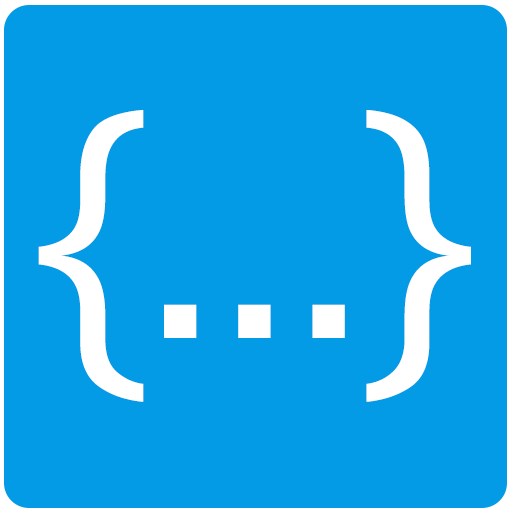
<style>
.page{position:relative;width:512px;height:512px;background:#039be5}
.page>*{position:absolute;margin:0}
.t1{font:312.5px "Helvetica";letter-spacing:-0.04em;color:#ffffff}
</style>
<div class="page">
<p class="t1" style="left:38px;top:110px;width:433px;height:292px">{...}</p>
</div>
